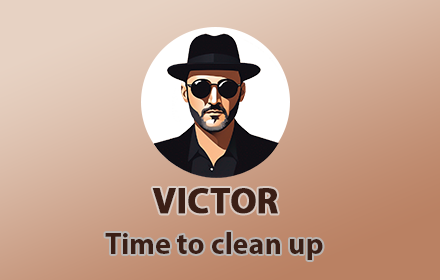
<style>
.page{position:relative;width:440px;height:280px}
.page>*{position:absolute;margin:0}
.t1{font:36px "MyriadPro-Bold";color:#3b1f16;font-weight:bold}
.t2{font:30px "MyriadPro-Bold";color:#3b1f16}
</style>
<div class="page">
<p class="t1" style="left:152px;top:188px;width:126px;height:26px">VICTOR</p>
<p class="t2" style="left:105px;top:232px;width:218px;height:28px">Time to clean up</p>
</div>
